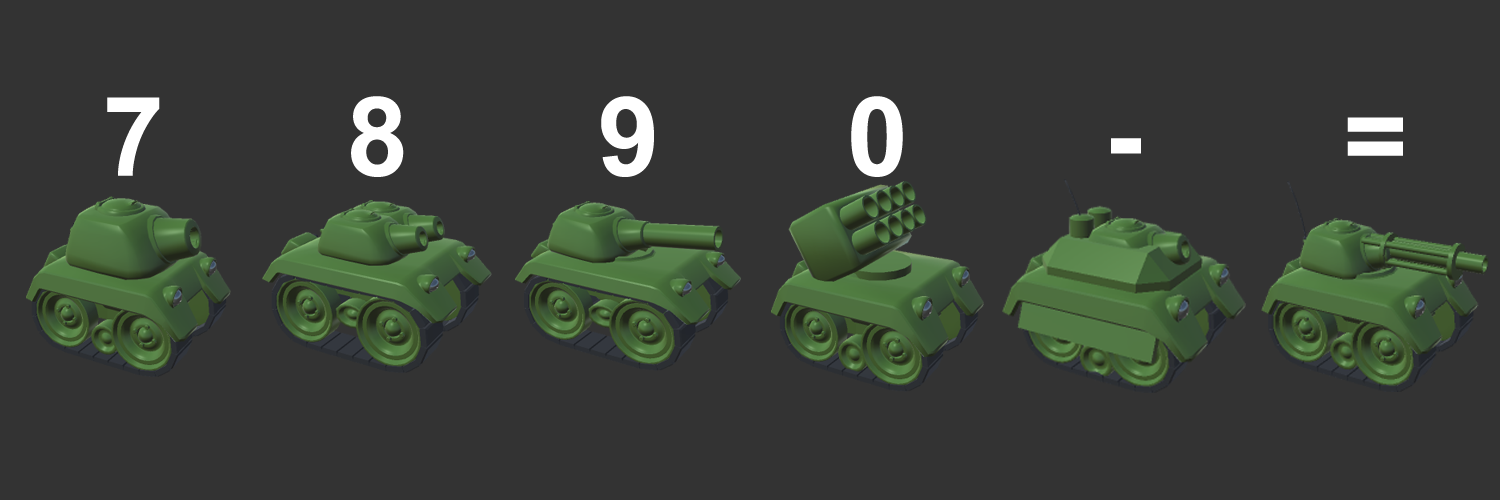
<style>
.page{position:relative;width:1500px;height:500px;background:#333333}
.page>*{position:absolute;margin:0}
.t1{font:110.2px "Arial-BoldMT";letter-spacing:-0.04em;color:#ffffff}
</style>
<div class="page">
<p class="t1" style="left:107px;top:97px;width:53px;height:79px">7</p>
<p class="t1" style="left:351px;top:96px;width:53px;height:81px">8</p>
<p class="t1" style="left:601px;top:96px;width:53px;height:81px">9</p>
<p class="t1" style="left:851px;top:96px;width:52px;height:81px">0</p>
<p class="t1" style="left:1347px;top:117px;width:56px;height:39px">=</p>
<p class="t1" style="left:1111px;top:138px;width:30px;height:16px">-</p>
</div>
